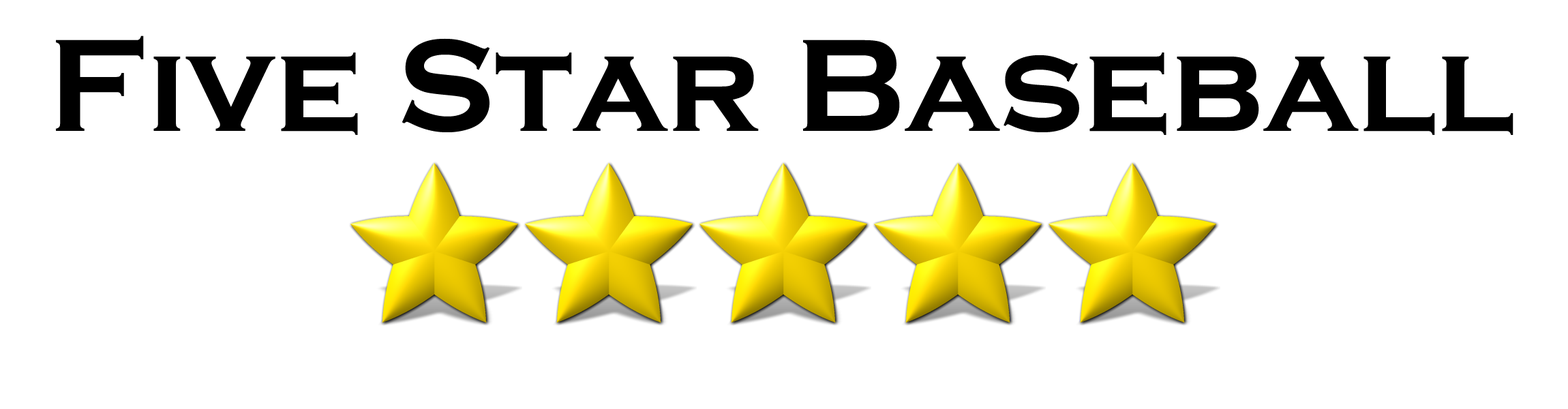
<style>
.page{position:relative;width:1568px;height:409px;background:#ffffff}
.page>*{position:absolute;margin:0}
.t1{font:136.3px "CopperplateGothic-Bold";color:#000000}
</style>
<div class="page">
<p class="t1" style="left:55px;top:35px;width:1458px;height:100px">Five Star Baseball</p>
</div>
